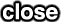
<style>
.page{position:relative;width:62px;height:22px;background:#ffffff}
.page>*{position:absolute;margin:0}
.t1{font:21.7px "Helvetica-Bold";color:#ffffff}
</style>
<div class="page">
<p class="t1" style="left:3px;top:3px;width:55px;height:17px">close</p>
</div>
